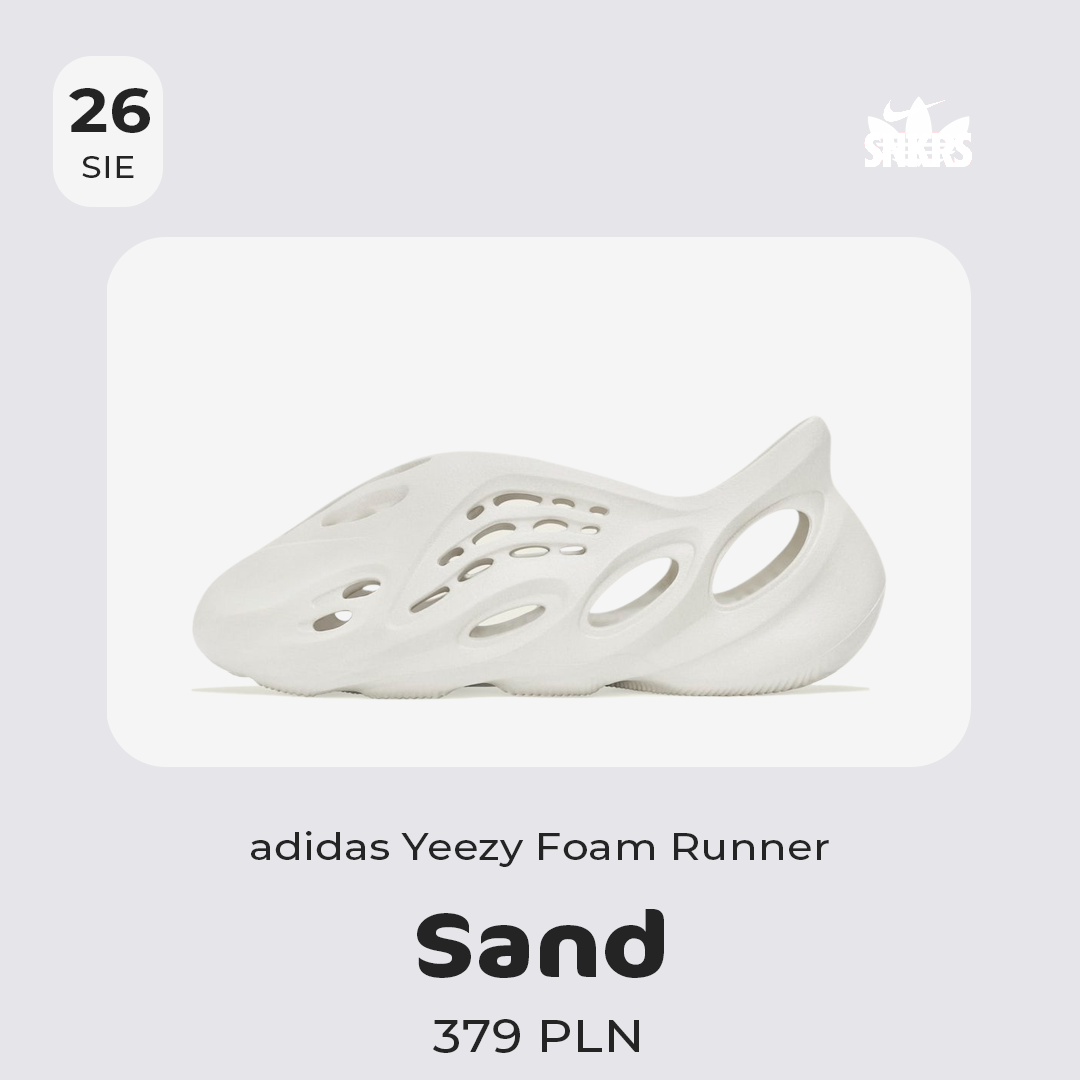
<style>
.page{position:relative;width:1080px;height:1080px;background:#e5e5ea}
.page>*{position:absolute;margin:0}
.t1{font:61.3px "Montserrat-Bold";letter-spacing:0.01em;color:#242424;scale:1.09 1}
.t2{font:30.7px "Montserrat-Medium";letter-spacing:0.01em;color:#242424;scale:1.09 1}
.t3{font:38.3px "Montserrat-Medium";letter-spacing:0.01em;color:#242424;scale:1.09 1}
.t4{font:92px "Cocon-Bold";letter-spacing:0.01em;color:#242424;scale:1.09 1}
.t5{font:46px "Montserrat-Medium";letter-spacing:0.01em;color:#242424;scale:1.09 1}
</style>
<div class="page">
<p class="t1" style="left:69px;top:88px;width:81px;height:45px">26</p>
<p class="t2" style="left:82px;top:156px;width:52px;height:22px">SIE</p>
<p class="t3" style="left:251px;top:831px;width:578px;height:36px">adidas Yeezy Foam Runner</p>
<p class="t4" style="left:417px;top:909px;width:247px;height:69px">Sand</p>
<p class="t5" style="left:433px;top:1019px;width:206px;height:34px">379 PLN</p>
</div>
